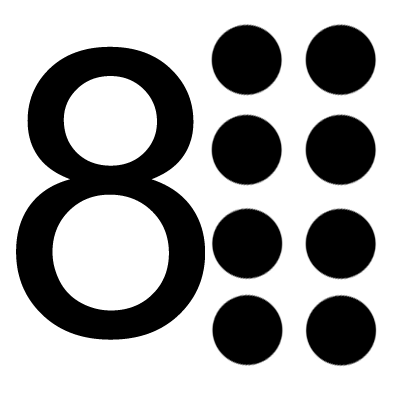
<style>
.page{position:relative;width:400px;height:400px;background:#ffffff}
.page>*{position:absolute;margin:0}
.t1{font:400.2px "ArialMT";color:#000000}
</style>
<div class="page">
<p class="t1" style="left:16px;top:46px;width:189px;height:294px">8</p>
</div>
